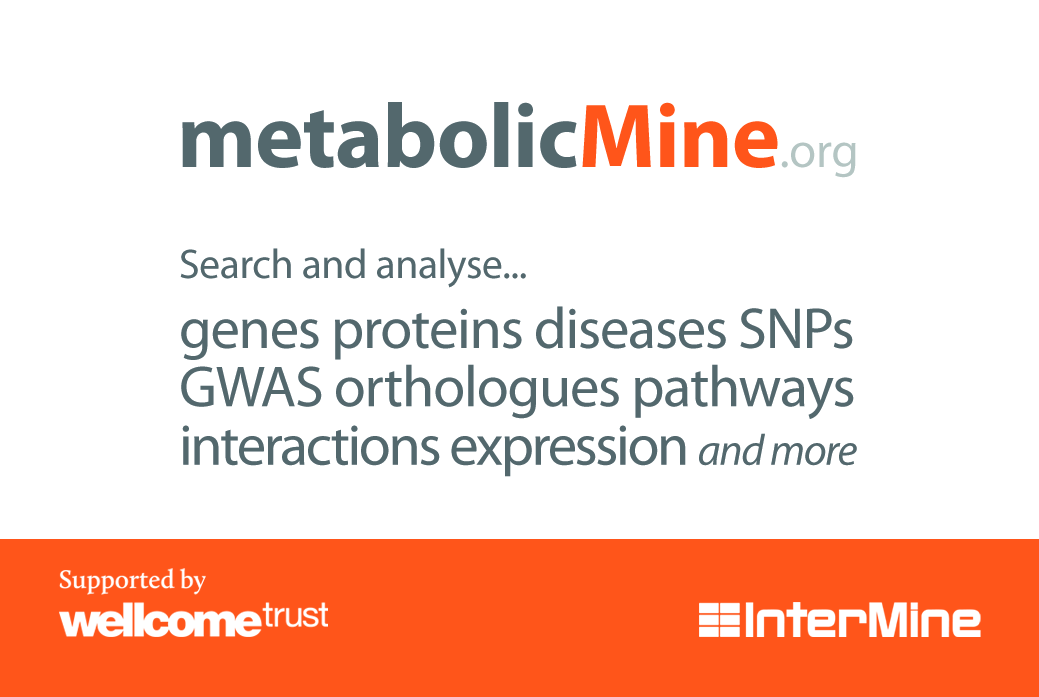
<style>
.page{position:relative;width:1039px;height:697px;background:#ffffff}
.page>*{position:absolute;margin:0}
.t1{font:91.7px "MyriadPro-Bold";letter-spacing:-0.01em;color:#53686d}
.t2{font:91.7px "MyriadPro-Bold";letter-spacing:-0.01em;color:#ff551a}
.t3{font:49.6px "MyriadPro-Regular";letter-spacing:-0.01em;color:#b3c5c3}
.t4{font:41.7px "MyriadPro-Regular";letter-spacing:-0.01em;color:#53686d}
.t5{font:58.3px/58.3px "MyriadPro-Regular";letter-spacing:-0.02em;color:#53686d}
.t6{font:58.3px/58.3px "MyriadPro-Regular";letter-spacing:-0.04em;color:#53686d}
.t7{font:43.8px/58.3px "MyriadPro-It";letter-spacing:-0.03em;color:#53686d}
</style>
<div class="page">
<p class="t1" style="left:182px;top:102px;width:674px;height:76px">metabolic<span class="t2">Mine</span><span class="t3">.org</span></p>
<p class="t4" style="left:180px;top:248px;width:346px;height:40px">Search and analyse...</p>
<p class="t5" style="left:181px;top:306px;width:676px;height:171px">genes proteins diseases SNPs<br>GWAS orthologues pathways<br><span class="t6">interactions expression </span><span class="t7">and more</span></p>
</div>
